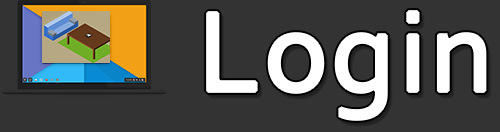
<style>
.page{position:relative;width:500px;height:132px;background:#333333}
.page>*{position:absolute;margin:0}
.t1{font:120.4px "Corbel";color:#ffffff;font-weight:bold}
</style>
<div class="page">
<p class="t1" style="left:205px;top:9px;width:283px;height:113px">Login</p>
</div>
